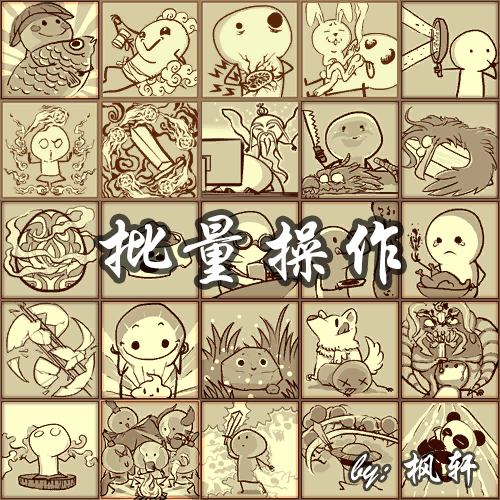
<style>
.page{position:relative;width:500px;height:500px}
.page>*{position:absolute;margin:0}
.t1{font:80px "STXingkai";color:#ffffff}
.t2{font:40px "STXingkai";color:#ffffff}
</style>
<div class="page">
<p class="t1" style="left:99px;top:215px;width:302px;height:70px">批量操作</p>
<p class="t2" style="left:351px;top:450px;width:126px;height:39px">by: 枫轩</p>
</div>
